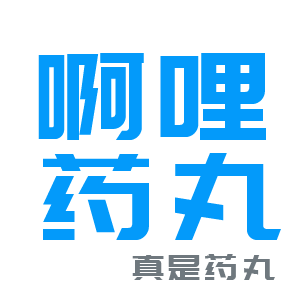
<style>
.page{position:relative;width:300px;height:300px;background:#ffffff}
.page>*{position:absolute;margin:0}
.t1{font:120px/100px "PangMenZhengDao";letter-spacing:0.1em;color:#039afa}
.t2{font:35px "PangMenZhengDao";letter-spacing:0.1em;color:#6f787e}
</style>
<div class="page">
<p class="t1" style="left:38px;top:53px;width:243px;height:187px">啊哩<br>药丸</p>
<p class="t2" style="left:132px;top:254px;width:143px;height:26px">真是药丸</p>
</div>
